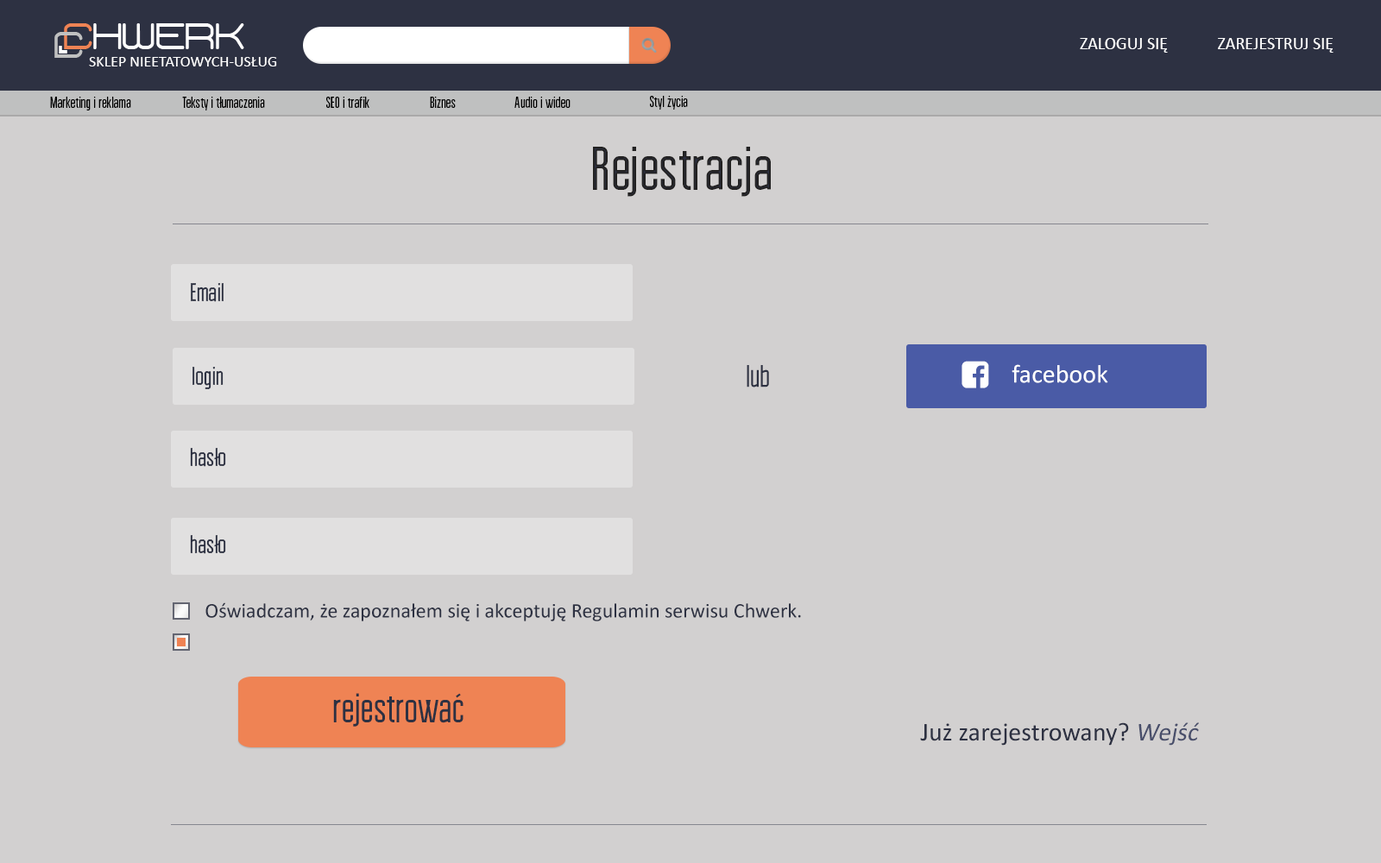
<style>
.page{position:relative;width:1381px;height:863px;background:#d2d0d0}
.page>*{position:absolute;margin:0}
.t1{font:34.2px "Phantomcyr-lat";color:#bfc0c0}
.t2{font:17.3px "Calibri";color:#ffffff}
.t3{font:15.5px "Calibri";color:#ffffff}
.t4{font:15.5px "BravoRG";color:#000000}
.t5{font:62.2px "BravoRG";color:#222121}
.t6{font:25.9px "BravoRG";color:#2d3142}
.t7{font:31.1px "BravoRG";color:#2d3142}
.t8{font:25.9px "Calibri";color:#ffffff}
.t9{font:20.7px "Calibri";color:#2d3142}
.t10{font:41.4px "BravoRG";color:#2d3142}
.t11{font:25.9px "Calibri";color:#2d3142}
.t12{font:25.9px "Calibri";color:#494f6b;font-style:italic}
</style>
<div class="page">
<p class="t1" style="left:54px;top:32px;width:29px;height:26px">C</p>
<p class="t2" style="left:1080px;top:38px;width:88px;height:15px">ZALOGUJ SIĘ</p>
<p class="t2" style="left:1218px;top:38px;width:116px;height:15px">ZAREJESTRUJ SIĘ</p>
<p class="t3" style="left:89px;top:57px;width:188px;height:9px">SKLEP NIEETATOWYCH-USŁUG</p>
<p class="t4" style="left:50px;top:97px;width:81px;height:14px">Marketing i reklama</p>
<p class="t4" style="left:182px;top:97px;width:83px;height:14px">Teksty i tłumaczenia</p>
<p class="t4" style="left:326px;top:97px;width:43px;height:11px">SEO i trafik</p>
<p class="t4" style="left:430px;top:97px;width:26px;height:11px">Biznes</p>
<p class="t4" style="left:515px;top:97px;width:56px;height:11px">Audio i wideo</p>
<p class="t4" style="left:650px;top:96px;width:38px;height:14px">Styl życia</p>
<p class="t5" style="left:593px;top:147px;width:178px;height:50px">Rejestracja</p>
<p class="t6" style="left:191px;top:283px;width:33px;height:19px">Email</p>
<p class="t7" style="left:747px;top:365px;width:22px;height:23px">lub</p>
<p class="t8" style="left:1012px;top:364px;width:96px;height:19px">facebook</p>
<p class="t6" style="left:193px;top:367px;width:31px;height:22px">login</p>
<p class="t6" style="left:190px;top:448px;width:36px;height:19px">hasło</p>
<p class="t6" style="left:190px;top:535px;width:36px;height:19px">hasło</p>
<p class="t9" style="left:205px;top:603px;width:596px;height:19px">Oświadczam, że zapoznałem się i akceptuję Regulamin serwisu Chwerk.</p>
<p class="t10" style="left:333px;top:693px;width:131px;height:34px">rejestrować</p>
<p class="t11" style="left:920px;top:723px;width:279px;height:23px">Już zarejestrowany? <span class="t12">Wejść</span></p>
</div>
